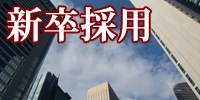
<style>
.page{position:relative;width:200px;height:100px}
.page>*{position:absolute;margin:0}
.t1{font:36px "KozMinPr6N-Bold";color:#ffffff;font-weight:bold}
</style>
<div class="page">
<p class="t1" style="left:7px;top:6px;width:144px;height:36px">新卒採用</p>
</div>
